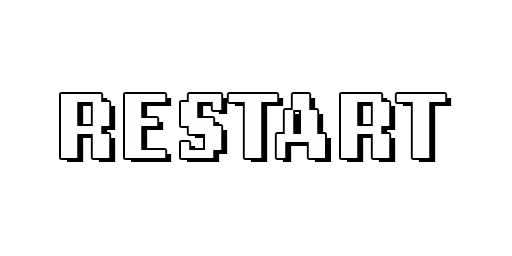
<style>
.page{position:relative;width:512px;height:256px;background:#ffffff}
.page>*{position:absolute;margin:0}
.t1{font:96px "LoRes12OT-Bold";color:#fefefe}
</style>
<div class="page">
<p class="t1" style="left:61px;top:94px;width:385px;height:64px">RESTART</p>
</div>
